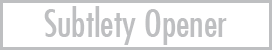
<style>
.page{position:relative;width:272px;height:50px;background:#ffffff}
.page>*{position:absolute;margin:0}
.t1{font:37.3px "FuturaCondensed";color:#bebfc1}
</style>
<div class="page">
<p class="t1" style="left:44px;top:6px;width:183px;height:39px">Subtlety Opener</p>
</div>
